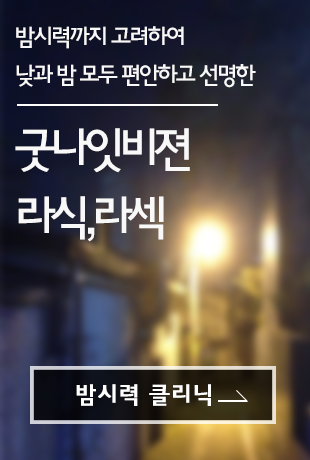
<style>
.page{position:relative;width:310px;height:460px}
.page>*{position:absolute;margin:0}
.t1{font:24px/38px "HaanYGodic23";letter-spacing:-0.14em;color:#f9f8f8}
.t2{font:48px/68px "HaanYGodic23";letter-spacing:-0.18em;color:#f9f8f8}
.t3{font:24px "HaanYGodic23";letter-spacing:-0.02em;color:#ffffff;font-weight:bold}
</style>
<div class="page">
<p class="t1" style="left:16px;top:26px;width:240px;height:62px">밤시력까지 고려하여<br>낮과 밤 모두 편안하고 선명한</p>
<p class="t2" style="left:15px;top:128px;width:175px;height:114px">굿나잇비젼<br>라식,라섹</p>
<p class="t3" style="left:76px;top:384px;width:135px;height:22px">밤시력 클리닉</p>
</div>
